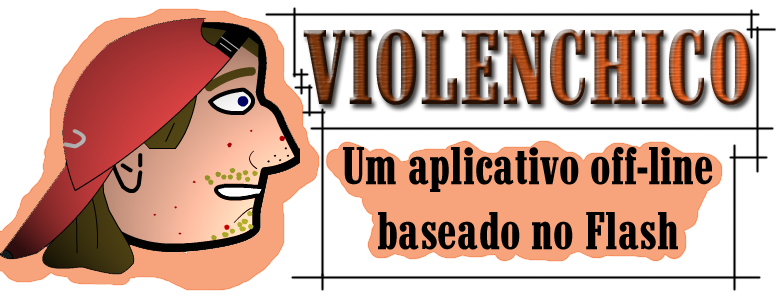
<style>
.page{position:relative;width:780px;height:300px;background:#ffffff}
.page>*{position:absolute;margin:0}
.t1{font:108px "Marlboro"}
.t2{font:54px "Marlboro";color:#000000}
</style>
<div class="page">
<p class="t1" style="left:303px;top:29px;width:448px;height:76px">VIOLENCHICO</p>
<p class="t2" style="left:343px;top:147px;width:370px;height:103px;text-align:center">Um aplicativo off-line<br>baseado no Flash</p>
</div>
